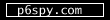
<style>
.page{position:relative;width:110px;height:20px;background:#000000}
.page>*{position:absolute;margin:0}
.t1{font:12px "LucidaConsole";color:#ffffff}
</style>
<div class="page">
<p class="t1" style="left:18px;top:5px;width:64px;height:12px">p6spy.com</p>
</div>
